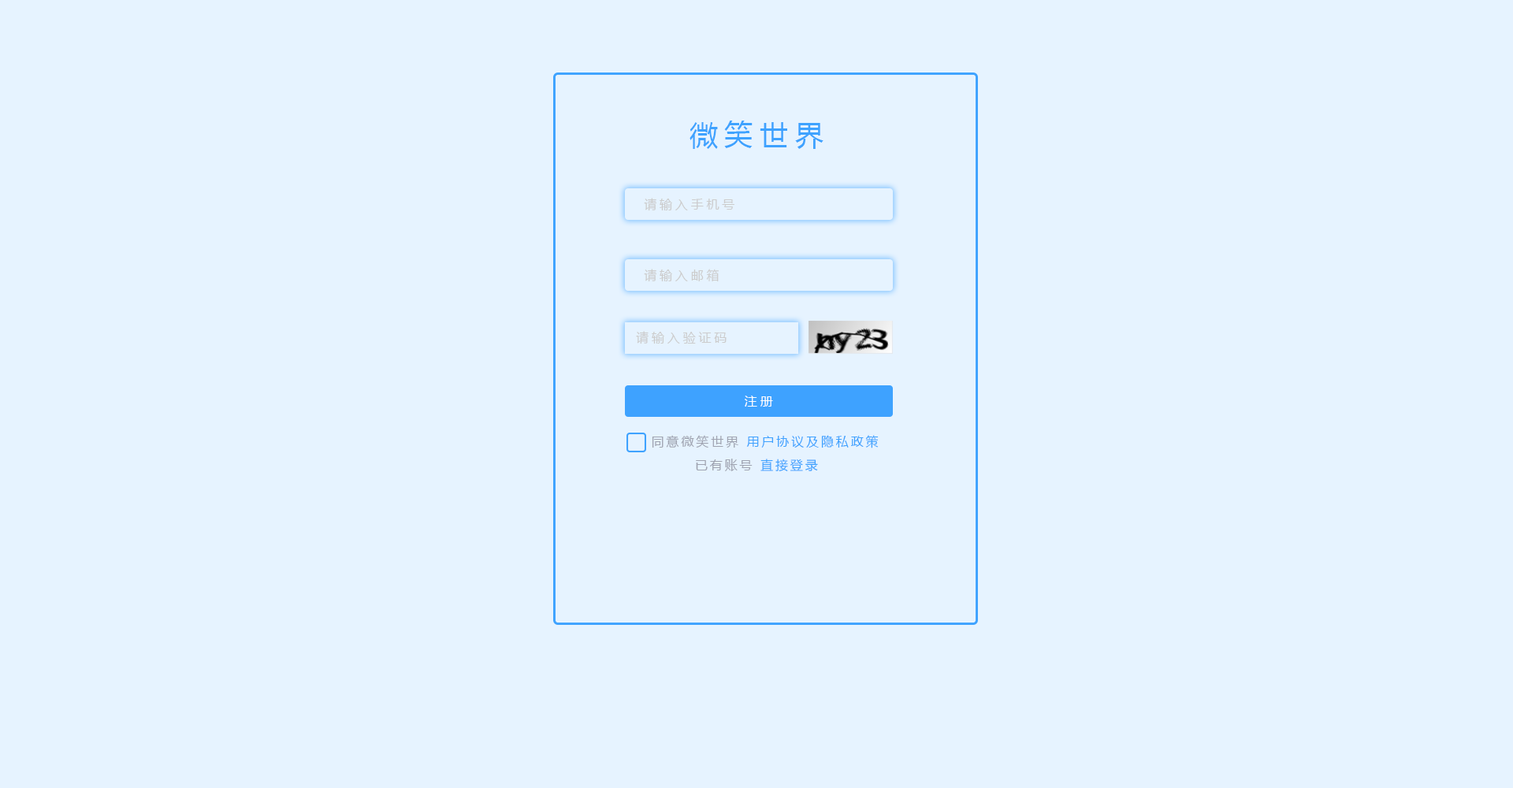
<style>
.page{position:relative;width:1513px;height:788px;background:#e6f3ff}
.page>*{position:absolute;margin:0}
.t1{font:28.4px "MicrosoftYaHei";letter-spacing:0.24em;color:#3ea2ff}
.t2{font:12.6px "MicrosoftYaHei";letter-spacing:0.24em;color:#cccccc}
.t3{font:12.6px "MicrosoftYaHei";letter-spacing:0.24em;color:#ffffff}
.t4{font:12.6px "MicrosoftYaHei";letter-spacing:0.18em;color:#3ea2ff}
.t5{font:12.6px "MicrosoftYaHei";letter-spacing:0.18em;color:#9fa3b0}
</style>
<div class="page">
<p class="t1" style="left:690px;top:121px;width:134px;height:28px">微笑世界</p>
<p class="t2" style="left:644px;top:198px;width:90px;height:13px">请输入手机号</p>
<p class="t2" style="left:644px;top:269px;width:75px;height:13px">请输入邮箱</p>
<p class="t2" style="left:636px;top:331px;width:91px;height:13px">请输入验证码</p>
<p class="t3" style="left:745px;top:396px;width:28px;height:11px">注册</p>
<p class="t4" style="left:652px;top:435px;width:227px;height:13px"><span class="t5">同意微笑世界 </span>用户协议及隐私政策</p>
<p class="t5" style="left:696px;top:459px;width:122px;height:12px">已有账号 <span class="t4">直接登录</span></p>
</div>
